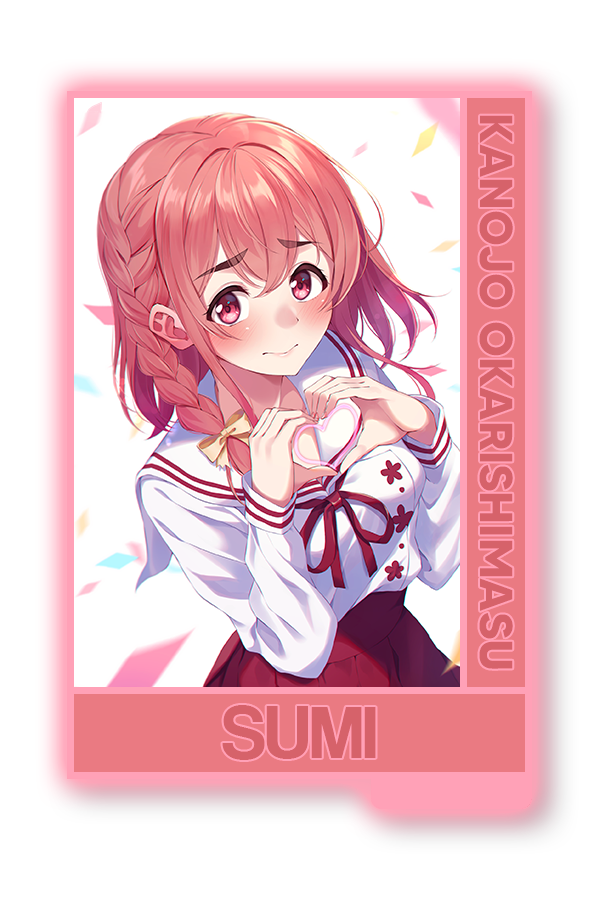
<style>
.page{position:relative;width:600px;height:900px;background:#ffffff}
.page>*{position:absolute;margin:0}
.t1{font:45.9px "MADETOMMY-Bold";color:#d17676}
.t2{font:76.6px "CoolveticaRg-Regular";color:#d17676}
</style>
<div class="page">
<p class="t1" style="left:479px;top:115px;width:34px;height:554px;rotate:90deg">KANOJO OKARISHIMASU</p>
<p class="t2" style="left:222px;top:705px;width:154px;height:55px">SUMI</p>
</div>
